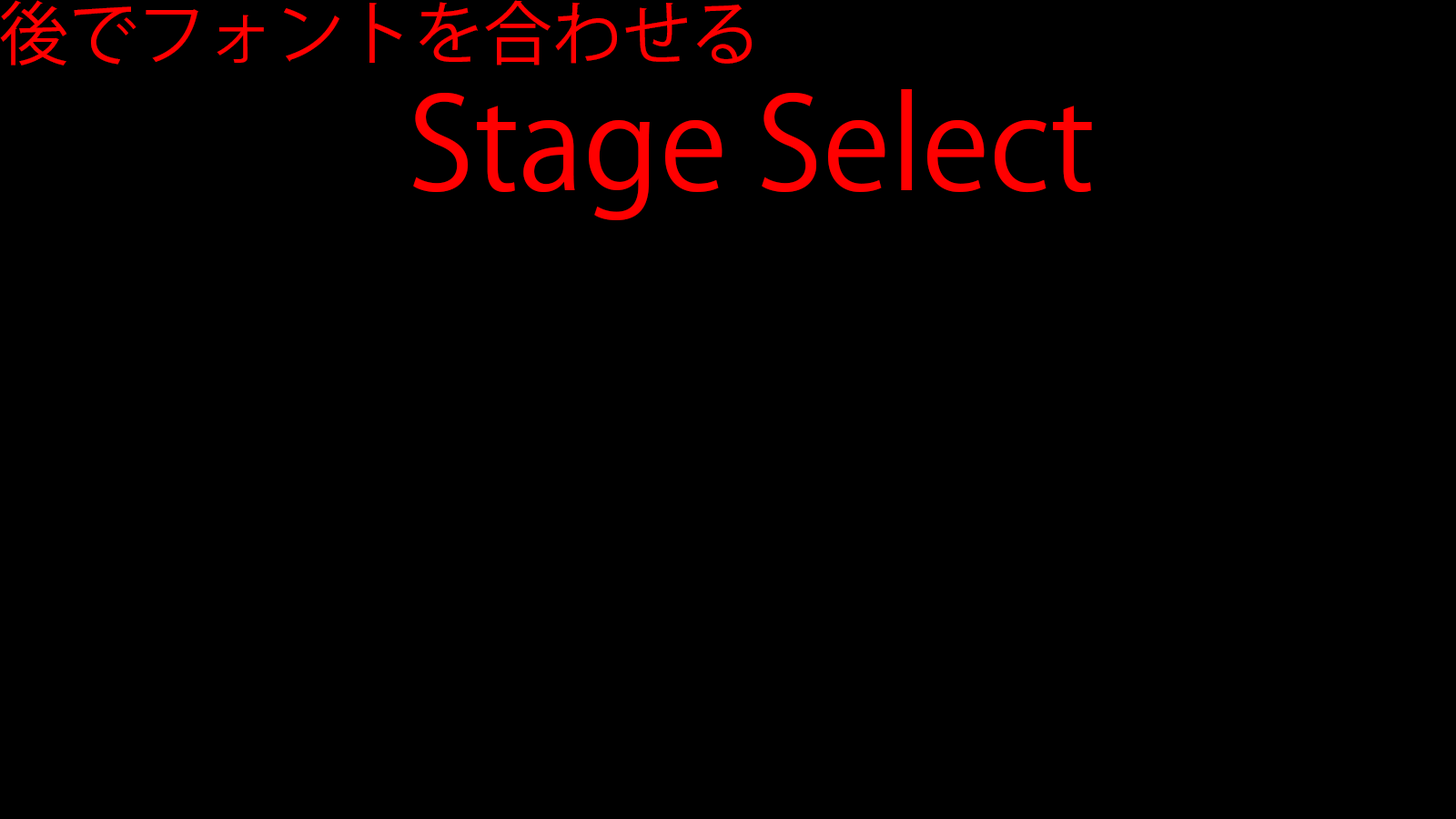
<style>
.page{position:relative;width:1456px;height:819px;background:#000000}
.page>*{position:absolute;margin:0}
.t1{font:69.2px "KozGoPr6N-Regular";color:#ff0000}
.t2{font:125.7px "KozGoPr6N-Regular";color:#ff0000}
</style>
<div class="page">
<p class="t1" style="left:0px;top:0px;width:752px;height:66px">後でフォントを合わせる</p>
<p class="t2" style="left:413px;top:89px;width:679px;height:131px">Stage Select</p>
</div>
